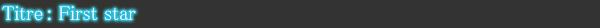
<style>
.page{position:relative;width:600px;height:28px;background:#333333}
.page>*{position:absolute;margin:0}
.t1{font:20px "MS-PMincho";color:#ffffff}
</style>
<div class="page">
<p class="t1" style="left:2px;top:6px;width:134px;height:15px">Titre : First star</p>
</div>
